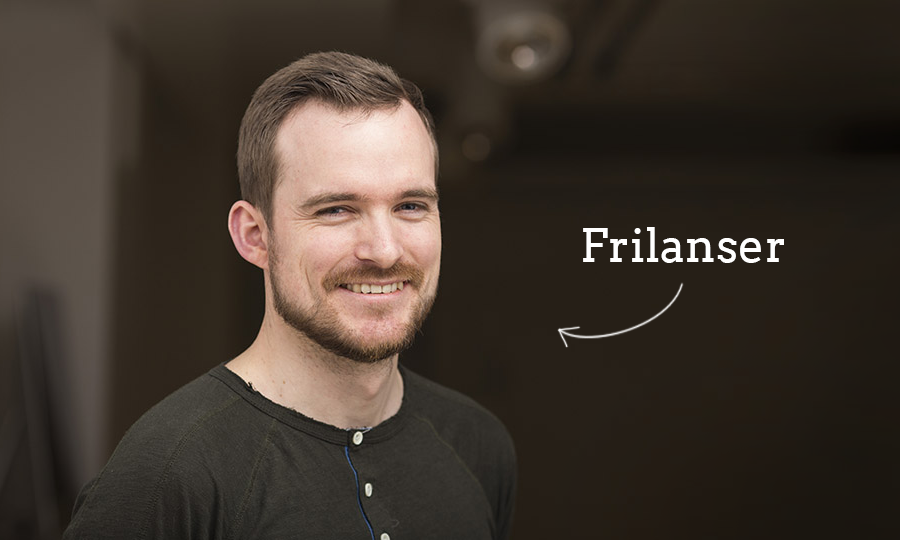
<style>
.page{position:relative;width:900px;height:540px}
.page>*{position:absolute;margin:0}
.t1{font:46.3px "Arvo";color:#ffffff}
</style>
<div class="page">
<p class="t1" style="left:583px;top:227px;width:201px;height:36px">Frilanser</p>
</div>
